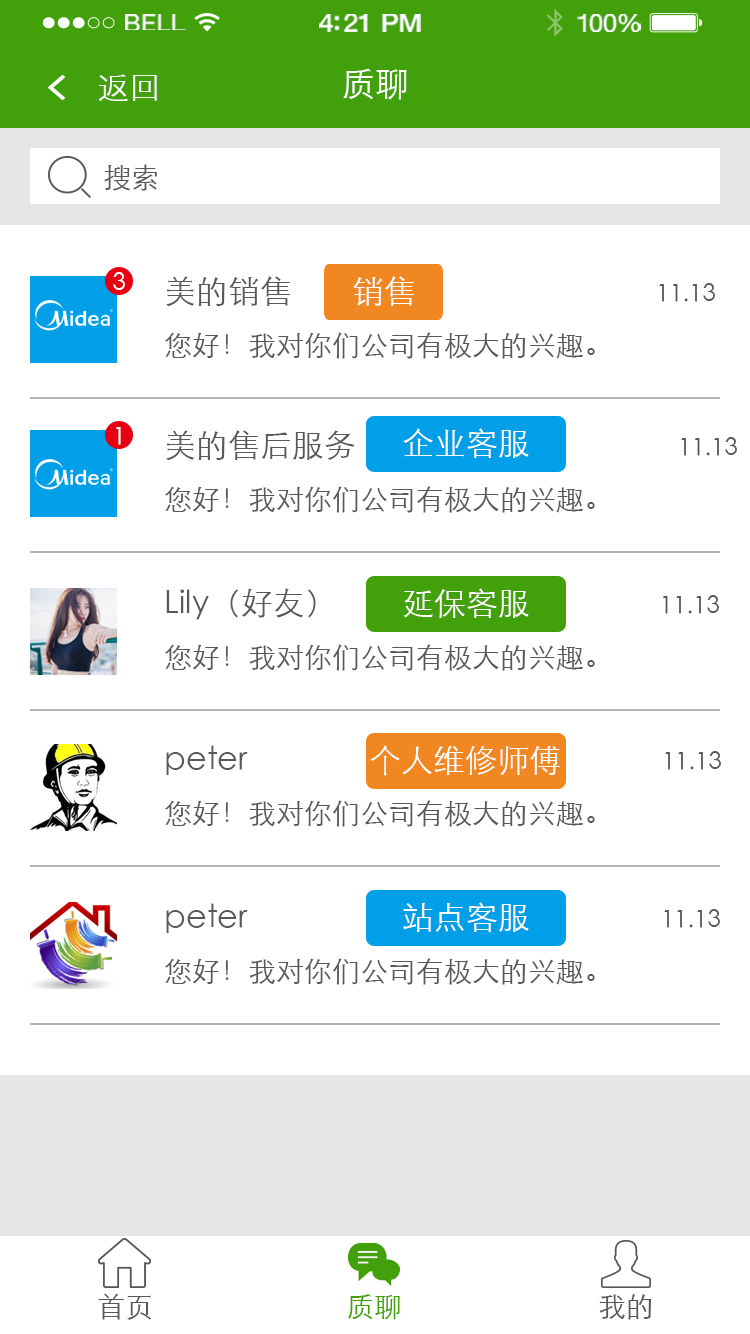
<style>
.page{position:relative;width:750px;height:1334px;background:#ffffff}
.page>*{position:absolute;margin:0}
.t1{font:23.3px "HelveticaNeue";letter-spacing:0.02em;color:#ffffff;scale:1.06 1}
.t2{font:25.3px "HelveticaNeue-Medium";letter-spacing:-0.02em;color:#ffffff;scale:1.06 1}
.t3{font:24.3px "HelveticaNeue";letter-spacing:-0.02em;color:#ffffff;scale:1.06 1}
.t4{font:32px "STXihei";color:#ffffff}
.t5{font:34px "STXihei";color:#ffffff}
.t6{font:28px "STXihei";color:#595757}
.t7{font:24px "STXihei";color:#ffffff}
.t8{font:28px/56px "STXihei";color:#595757}
.t9{font:32px/56px "STXihei";color:#595757}
.t10{font:24px/56px "STXihei";color:#595757}
.t11{font:28px "STXihei";color:#42a00a}
</style>
<div class="page">
<p class="t1" style="left:125px;top:14px;width:61px;height:16px">BELL</p>
<p class="t2" style="left:319px;top:14px;width:102px;height:18px">4:21 PM</p>
<p class="t3" style="left:577px;top:14px;width:64px;height:18px">100%</p>
<p class="t4" style="left:98px;top:74px;width:59px;height:27px">返回</p>
<p class="t5" style="left:343px;top:68px;width:64px;height:32px">质聊</p>
<p class="t6" style="left:104px;top:164px;width:53px;height:27px">搜索</p>
<p class="t7" style="left:113px;top:272px;width:12px;height:18px">3</p>
<p class="t8" style="left:165px;top:276px;width:550px;height:83px"><span class="t9">美的销售                                                </span><span class="t10">11.13</span><br>您好！我对你们公司有极大的兴趣。</p>
<p class="t4" style="left:353px;top:276px;width:61px;height:30px">销售</p>
<p class="t7" style="left:116px;top:427px;width:5px;height:18px">1</p>
<p class="t8" style="left:165px;top:430px;width:572px;height:83px"><span class="t9">美的售后服务                                              </span><span class="t10">11.13</span><br>您好！我对你们公司有极大的兴趣。</p>
<p class="t4" style="left:403px;top:428px;width:126px;height:30px">企业客服</p>
<p class="t8" style="left:165px;top:588px;width:554px;height:83px"><span class="t9">Lily（好友）                                          </span><span class="t10">11.13</span><br>您好！我对你们公司有极大的兴趣。</p>
<p class="t4" style="left:403px;top:588px;width:126px;height:30px">延保客服</p>
<p class="t8" style="left:165px;top:745px;width:556px;height:82px"><span class="t9">peter                                                           </span><span class="t10">11.13</span><br>您好！我对你们公司有极大的兴趣。</p>
<p class="t4" style="left:370px;top:745px;width:190px;height:31px">个人维修师傅</p>
<p class="t8" style="left:165px;top:903px;width:555px;height:82px"><span class="t9">peter                                                           </span><span class="t10">11.13</span><br>您好！我对你们公司有极大的兴趣。</p>
<p class="t4" style="left:403px;top:902px;width:126px;height:30px">站点客服</p>
<p class="t6" style="left:98px;top:1293px;width:53px;height:27px">首页</p>
<p class="t11" style="left:348px;top:1294px;width:52px;height:26px">质聊</p>
<p class="t6" style="left:599px;top:1294px;width:53px;height:26px">我的</p>
</div>
